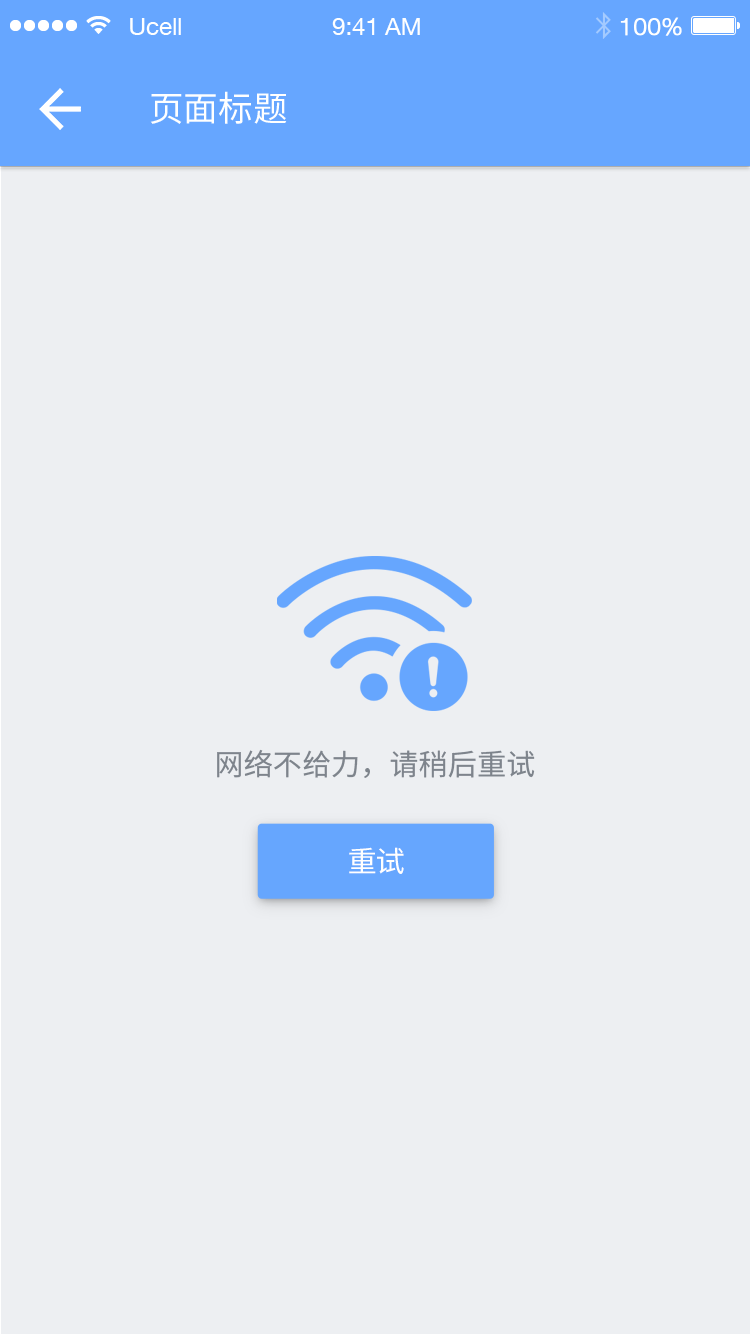
<style>
.page{position:relative;width:750px;height:1334px;background:#edeff2}
.page>*{position:absolute;margin:0}
.t1{font:34.8px "NotoSansHans-Regular";color:#ffffff}
.t2{font:29.2px "NotoSansHans-Regular";color:#7e848c}
.t3{font:29.2px "NotoSansHans-Regular";letter-spacing:0.01em;color:#ffffff;text-transform:uppercase}
</style>
<div class="page">
<p class="t1" style="left:150px;top:91px;width:137px;height:33px">页面标题</p>
<p class="t2" style="left:217px;top:749px;width:318px;height:29px">网络不给力，请稍后重试</p>
<p class="t3" style="left:349px;top:847px;width:55px;height:27px">重试</p>
</div>
